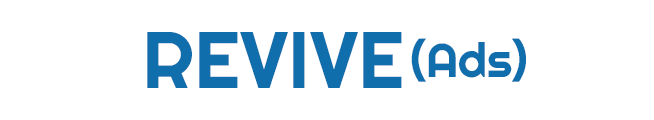
<style>
.page{position:relative;width:654px;height:120px;background:#ffffff}
.page>*{position:absolute;margin:0}
.t1{font:80px "Righteous-Regular";color:#106ead}
.t2{font:48px "Righteous-Regular";color:#106ead}
</style>
<div class="page">
<p class="t1" style="left:147px;top:32px;width:255px;height:56px">REVIVE</p>
<p class="t2" style="left:411px;top:38px;width:115px;height:44px">(Ads)</p>
</div>
